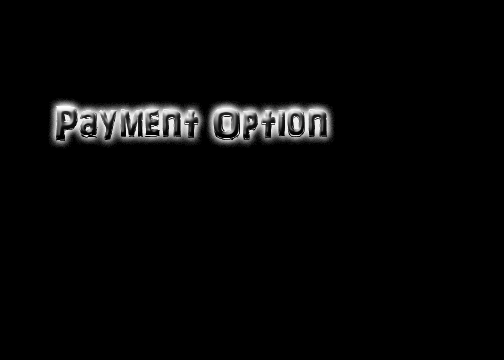
<style>
.page{position:relative;width:504px;height:360px;background:#000000}
.page>*{position:absolute;margin:0}
.t1{font:48px "ARDARLING";scale:0.84 1}
</style>
<div class="page">
<p class="t1" style="left:56px;top:106px;width:271px;height:35px">Payment Option</p>
<p class="t1" style="left:56px;top:106px;width:271px;height:35px">Payment Option</p>
</div>
